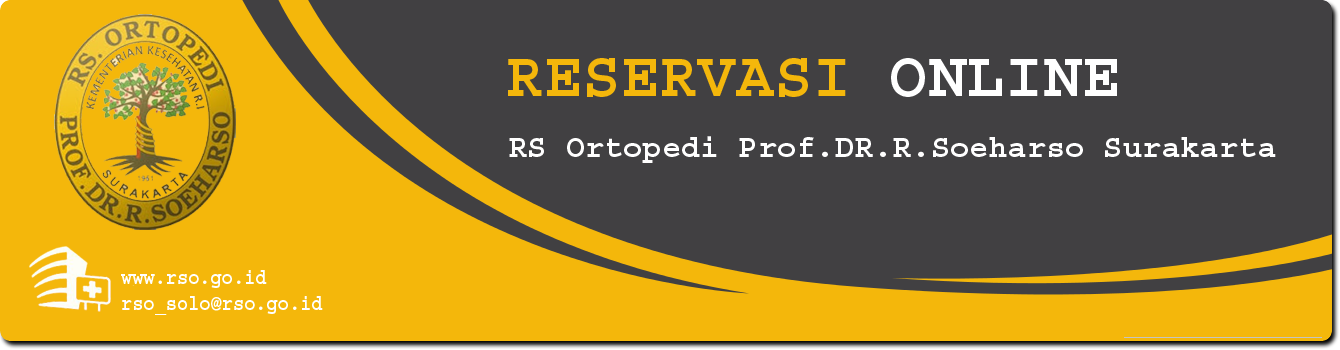
<style>
.page{position:relative;width:1340px;height:350px;background:#414042}
.page>*{position:absolute;margin:0}
.t1{font:64px "Courier-Bold";color:#f4b70b}
.t2{font:64px "Courier-Bold";color:#ffffff}
.t3{font:32px "Courier-Bold";color:#ffffff}
.t4{font:21.9px "Courier-Bold";color:#ffffff;scale:0.85 1}
</style>
<div class="page">
<p class="t1" style="left:508px;top:58px;width:609px;height:39px">RESERVASI <span class="t2">ONLINE</span></p>
<p class="t3" style="left:509px;top:136px;width:767px;height:27px">RS Ortopedi Prof.DR.R.Soeharso Surakarta</p>
<p class="t4" style="left:121px;top:270px;width:202px;height:45px">www.rso.go.id<br>rso_solo@rso.go.id</p>
</div>
